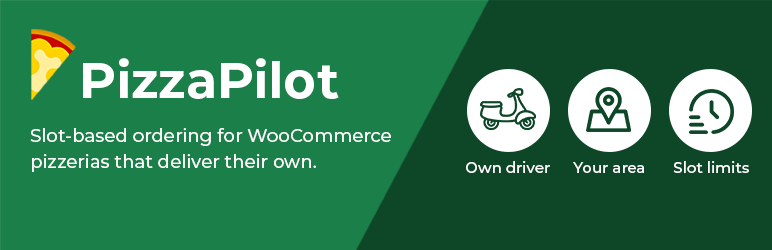
<style>
.page{position:relative;width:772px;height:250px;background:#1a7f48}
.page>*{position:absolute;margin:0}
.t1{font:50.4px "Montserrat-Bold";color:#ffffff}
.t2{font:18.1px/26.2px "Montserrat-Medium";color:#ffffff}
.t3{font:15.1px "Montserrat-Medium";color:#ffffff}
</style>
<div class="page">
<p class="t1" style="left:83px;top:58px;width:256px;height:41px">PizzaPilot</p>
<p class="t2" style="left:30px;top:128px;width:361px;height:44px">Slot-based ordering for WooCommerce<br>pizzerias that deliver their own.</p>
<p class="t3" style="left:466px;top:161px;width:84px;height:12px">Own driver</p>
<p class="t3" style="left:673px;top:161px;width:76px;height:12px">Slot limits</p>
<p class="t3" style="left:573px;top:162px;width:71px;height:11px">Your area</p>
</div>
